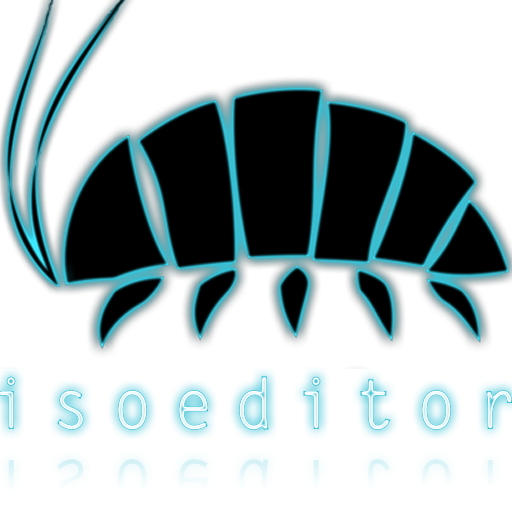
<style>
.page{position:relative;width:512px;height:512px;background:#ffffff}
.page>*{position:absolute;margin:0}
.t1{font:71.2px "LetterGothicStd-Bold";letter-spacing:0.3em;color:#f5fcfd;scale:0.95 1}
</style>
<div class="page">
<p class="t1" style="left:0px;top:459px;width:512px;height:54px">isoeditor</p>
</div>
